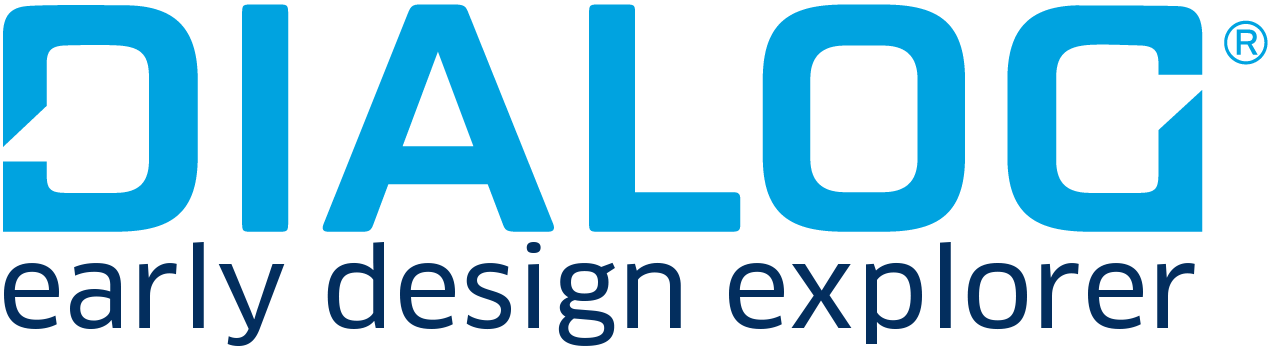
<style>
.page{position:relative;width:1270px;height:360px;background:#ffffff}
.page>*{position:absolute;margin:0}
.t1{font:108px "ClanOT-News";color:#032e5e;scale:1.06 1}
</style>
<div class="page">
<p class="t1" style="left:4px;top:242px;width:1191px;height:104px">early design explorer</p>
</div>
